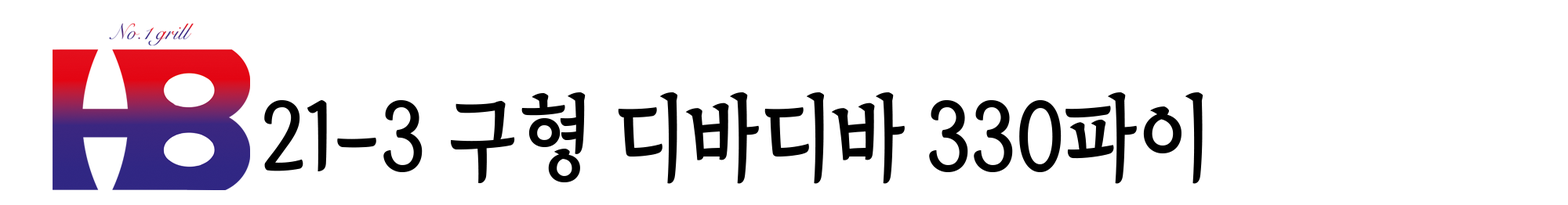
<style>
.page{position:relative;width:1568px;height:205px;background:#ffffff}
.page>*{position:absolute;margin:0}
.t1{font:93.7px "TheIndependenceHallofKorea-Regular";color:#000000;scale:0.89 1}
</style>
<div class="page">
<p class="t1" style="left:264px;top:93px;width:939px;height:91px">21-3 구형 디바디바 330파이</p>
</div>
